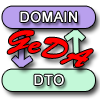
<style>
.page{position:relative;width:100px;height:100px}
.page>*{position:absolute;margin:0}
.t1{font:14px "ArialMT";letter-spacing:0.01em;color:#ffffff;font-weight:bold}
.t2{font:30px "BrushScriptStd";letter-spacing:0.01em;color:#ff0000;font-weight:bold}
</style>
<div class="page">
<p class="t1" style="left:20px;top:11px;width:57px;height:12px">DOMAIN</p>
<p class="t2" style="left:7px;top:30px;width:86px;height:37px;rotate:17deg">GeDA</p>
<p class="t1" style="left:34px;top:74px;width:30px;height:12px">DTO</p>
</div>
